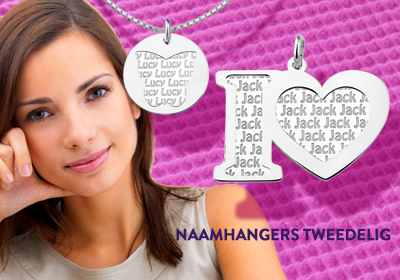
<style>
.page{position:relative;width:400px;height:280px}
.page>*{position:absolute;margin:0}
.t1{font:16px "BrandonGrotesque-Bold";letter-spacing:-0.02em;color:#381b63;font-weight:bold}
</style>
<div class="page">
<p class="t1" style="left:176px;top:228px;width:215px;height:13px">NAAMHANGERS TWEEDELIG</p>
</div>
